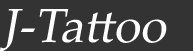
<style>
.page{position:relative;width:193px;height:51px;background:#333333}
.page>*{position:absolute;margin:0}
.t1{font:48px "PalatinoLinotype-Roman";color:#ffffff;font-style:italic}
</style>
<div class="page">
<p class="t1" style="left:0px;top:9px;width:167px;height:43px">J-Tattoo</p>
</div>
